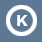
<style>
.page{position:relative;width:42px;height:42px;background:#5d7894}
.page>*{position:absolute;margin:0}
.t1{font:16px "Montserrat-Bold";color:#ffffff}
</style>
<div class="page">
<p class="t1" style="left:17px;top:15px;width:11px;height:11px">K</p>
</div>
